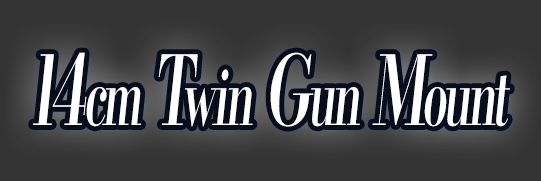
<style>
.page{position:relative;width:541px;height:181px;background:#333333}
.page>*{position:absolute;margin:0}
.t1{font:76.8px "KochoStd-Heavy";letter-spacing:-0.08em;color:#ffffff;font-style:italic;scale:0.6 1}
.t2{font:96px "KochoStd-Heavy";letter-spacing:-0.08em;color:#ffffff;font-style:italic;scale:0.6 1}
</style>
<div class="page">
<p class="t1" style="left:33px;top:52px;width:477px;height:75px"><span class="t2">14</span>cm<span class="t2"> T</span>win<span class="t2"> G</span>un<span class="t2"> M</span>ount</p>
</div>
